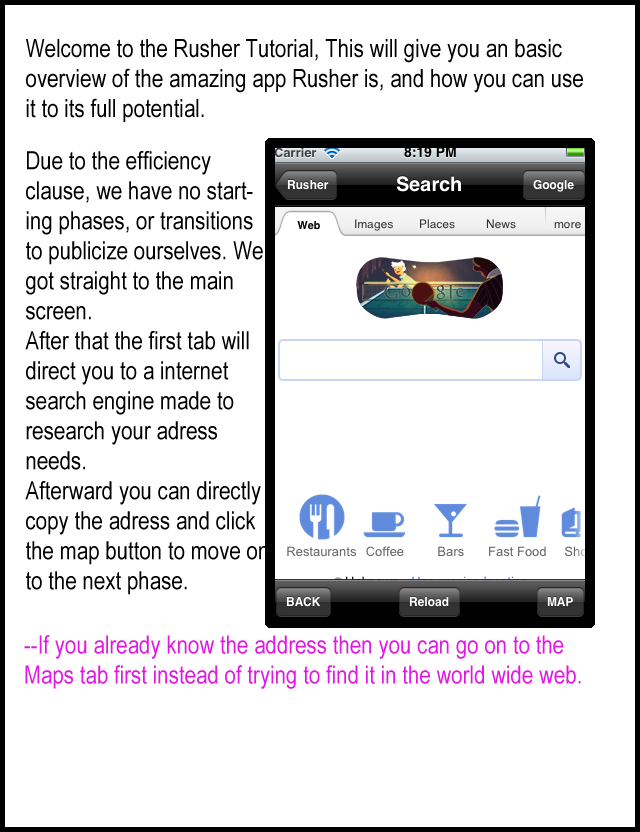
<style>
.page{position:relative;width:640px;height:832px;background:#ffffff}
.page>*{position:absolute;margin:0}
.t1{font:25px "ArialNarrow";color:#000000}
.t2{font:25px "ArialNarrow";color:#e217e4}
</style>
<div class="page">
<p class="t1" style="left:26px;top:39px;width:557px;height:83px">Welcome to the Rusher Tutorial, This will give you an basic overview of the amazing app Rusher is, and how you can use it to its full potential.</p>
<p class="t1" style="left:25px;top:151px;width:243px;height:444px">Due to the efficiency clause, we have no starting phases, or transitions to publicize ourselves. We got straight to the main screen.<br>After that the first tab will direct you to a internet search engine made to research your adress needs. <br>Afterward you can directly copy the adress and click the map button to move on to the next phase.</p>
<p class="t2" style="left:24px;top:635px;width:557px;height:54px">--If you already know the address then you can go on to the Maps tab first instead of trying to find it in the world wide web.</p>
</div>
